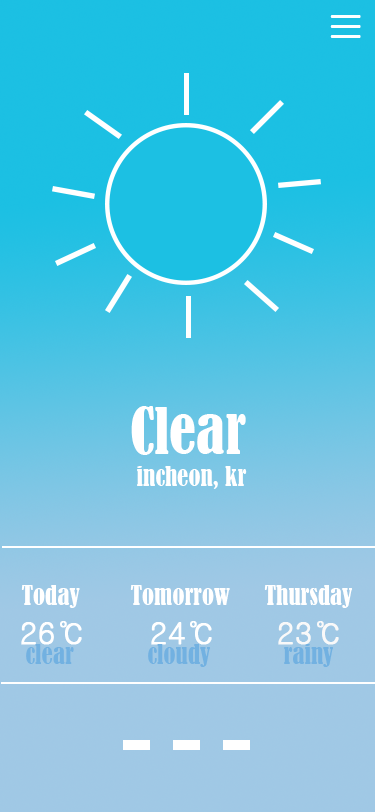
<style>
.page{position:relative;width:375px;height:812px}
.page>*{position:absolute;margin:0}
.t1{font:60px/10px "Gulim";color:#ffffff}
.t2{font:60px "BernardMT-Condensed";color:#ffffff}
.t3{font:25px "BernardMT-Condensed";color:#ffffff}
.t4{font:30px "Gulim";color:#ffffff;font-weight:bold}
.t5{font:30px "Gulim";color:#f9f9f9;font-weight:bold}
.t6{font:25px "BernardMT-Condensed";color:#72b1e1}
</style>
<div class="page">
<p class="t1" style="left:330px;top:15px;width:31px;height:23px">-<br>-<br>-</p>
<p class="t2" style="left:131px;top:406px;width:115px;height:49px">Clear</p>
<p class="t3" style="left:137px;top:466px;width:110px;height:23px">incheon, kr</p>
<p class="t3" style="left:21px;top:585px;width:59px;height:23px">Today</p>
<p class="t3" style="left:130px;top:585px;width:100px;height:20px">Tomorrow</p>
<p class="t3" style="left:264px;top:585px;width:88px;height:23px">Thursday</p>
<p class="t4" style="left:21px;top:621px;width:61px;height:24px">26℃</p>
<p class="t4" style="left:151px;top:621px;width:61px;height:24px">24℃</p>
<p class="t5" style="left:278px;top:621px;width:61px;height:24px">23℃</p>
<p class="t6" style="left:26px;top:644px;width:48px;height:20px">clear</p>
<p class="t6" style="left:148px;top:644px;width:62px;height:23px">cloudy</p>
<p class="t6" style="left:284px;top:644px;width:49px;height:23px">rainy</p>
</div>
